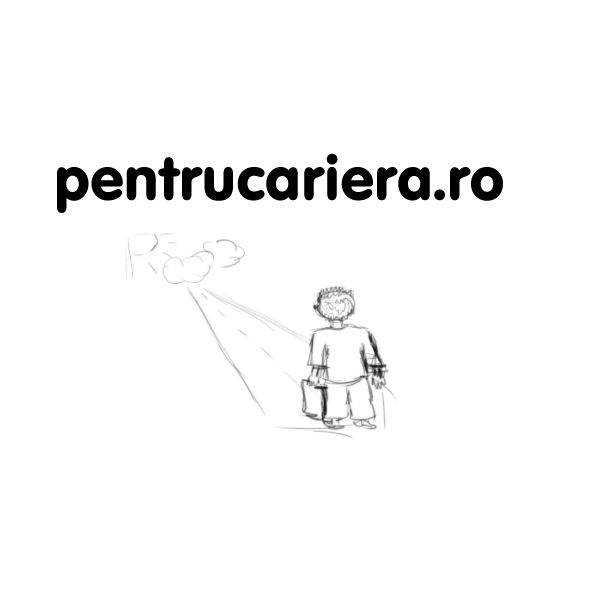
<style>
.page{position:relative;width:600px;height:599px;background:#ffffff}
.page>*{position:absolute;margin:0}
.t1{font:60px "VAGRoundedBT-Regular";color:#000000}
</style>
<div class="page">
<p class="t1" style="left:57px;top:153px;width:446px;height:60px">pentrucariera.ro</p>
</div>
